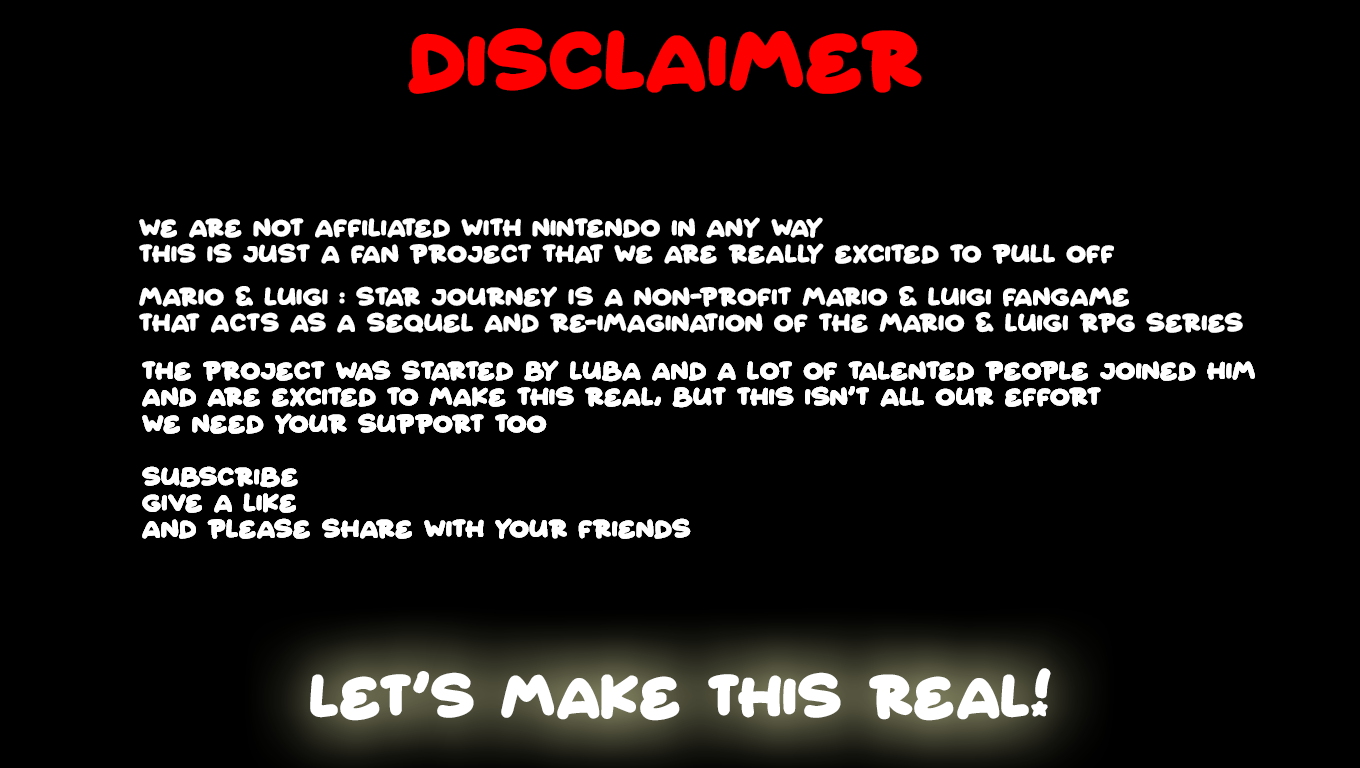
<style>
.page{position:relative;width:1360px;height:768px;background:#000000}
.page>*{position:absolute;margin:0}
.t1{font:72px "Starborn";color:#ff0000}
.t2{font:22px "Starborn";color:#ffffff}
.t3{font:52px "Starborn";color:#ffffff}
</style>
<div class="page">
<p class="t1" style="left:408px;top:28px;width:514px;height:66px">DISCLAIMER</p>
<p class="t2" style="left:139px;top:217px;width:975px;height:47px">wE ARE NOT AFFILIATED WITH NINTENDO IN ANY WAY<br>THIS IS JUST A FAN PROJECT THAT WE ARE REALLY EXCITED TO PULL OFF</p>
<p class="t2" style="left:139px;top:286px;width:1104px;height:47px">MARIO &amp; LUIGI : STAR JOURNEY IS A NON-PROFIT MARIO &amp; LUIGI FANGAME<br>THAT ACTS AS A SEQUEL AND RE-IMAGINATION OF THE MARIO &amp; LUIGI RPG SERIES</p>
<p class="t2" style="left:142px;top:360px;width:1113px;height:179px">THE PROJECT WAS STARTED BY LUBA AND A LOT OF TALENTED PEOPLE JOINED HIM<br>AND ARE EXCITED TO MAKE THIS REAL, BUT THIS ISN’T ALL OUR EFFORT <br>WE NEED YOUR SUPPORT TOO<br><br>SUBSCRIBE<br>GIVE A LIKE<br>AND PLEASE SHARE WITH YOUR FRIENDS</p>
<p class="t2" style="left:142px;top:360px;width:1113px;height:179px">THE PROJECT WAS STARTED BY LUBA AND A LOT OF TALENTED PEOPLE JOINED HIM<br>AND ARE EXCITED TO MAKE THIS REAL, BUT THIS ISN’T ALL OUR EFFORT <br>WE NEED YOUR SUPPORT TOO<br><br>SUBSCRIBE<br>GIVE A LIKE<br>AND PLEASE SHARE WITH YOUR FRIENDS</p>
<p class="t3" style="left:310px;top:668px;width:741px;height:53px">LET’S MAKE THIS REAL!</p>
</div>
